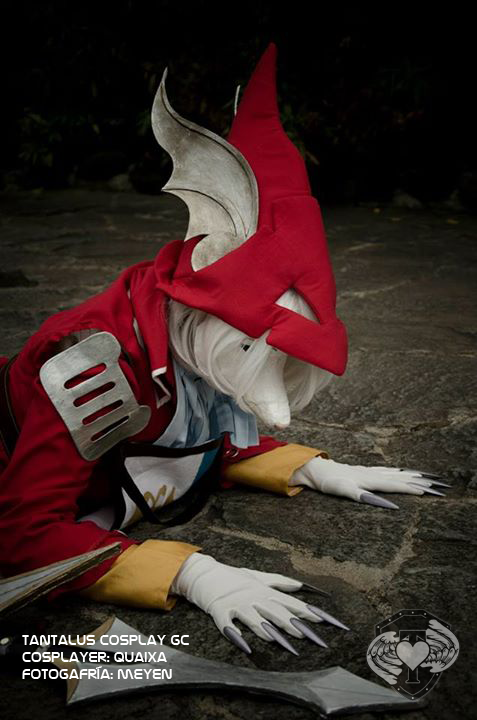
<style>
.page{position:relative;width:477px;height:720px}
.page>*{position:absolute;margin:0}
.t1{font:14px "NasalizationRg-Regular";color:#ffffff}
</style>
<div class="page">
<p class="t1" style="left:22px;top:635px;width:167px;height:44px">tantalus cosplay gc<br>cosplayer: quaixa<br>fotogafría: meyen</p>
</div>
